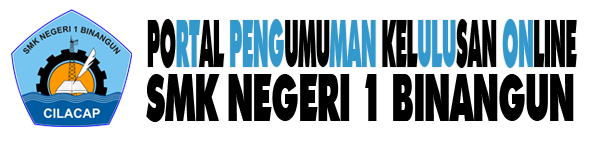
<style>
.page{position:relative;width:606px;height:160px;background:#ffffff}
.page>*{position:absolute;margin:0}
.t1{font:65.2px "OpineHeavy";color:#3399cc;scale:0.29 1}
.t2{font:65.2px "OpineHeavy";color:#000000;scale:0.29 1}
.t3{font:65.2px "OpineHeavy";color:#000000;scale:0.49 1}
</style>
<div class="page">
<p class="t1" style="left:147px;top:19px;width:430px;height:49px"><span class="t2">PO</span>RT<span class="t2">AL </span>PENG<span class="t2">UMU</span>MAN<span class="t2"> KEL</span>ULU<span class="t2">SAN </span>ON<span class="t2">LINE</span></p>
<p class="t3" style="left:146px;top:74px;width:428px;height:48px">SMK NEGERI 1 BINANGUN</p>
</div>
